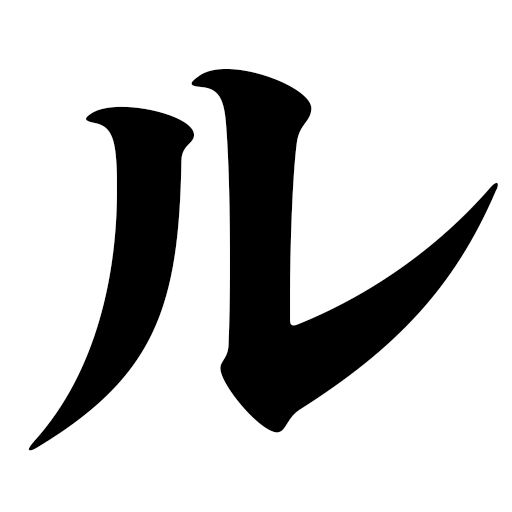
<style>
.page{position:relative;width:512px;height:512px;background:#ffffff}
.page>*{position:absolute;margin:0}
.t1{font:484.5px "MatissePro-EB";color:#000000}
</style>
<div class="page">
<p class="t1" style="left:28px;top:68px;width:470px;height:383px">ル</p>
</div>
